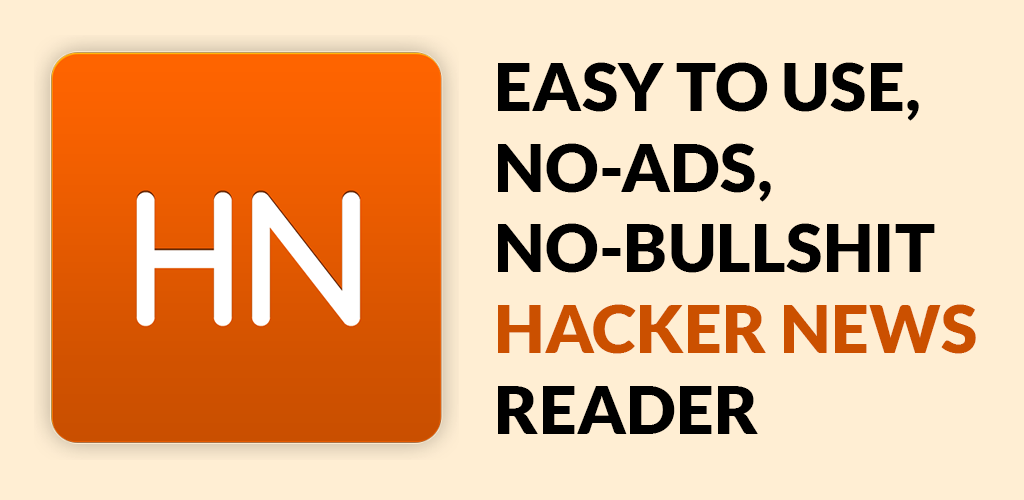
<style>
.page{position:relative;width:1024px;height:500px;background:#ffeed3}
.page>*{position:absolute;margin:0}
.t1{font:67.2px "Lato-Black";color:#000000;text-transform:uppercase}
.t2{font:67.2px "Lato-Black";color:#cb5000;text-transform:uppercase}
</style>
<div class="page">
<p class="t1" style="left:498px;top:62px;width:478px;height:372px">Easy to use,<br>No-ADS,<br>No-Bullshit<br><span class="t2">Hacker News<br></span>Reader</p>
</div>
